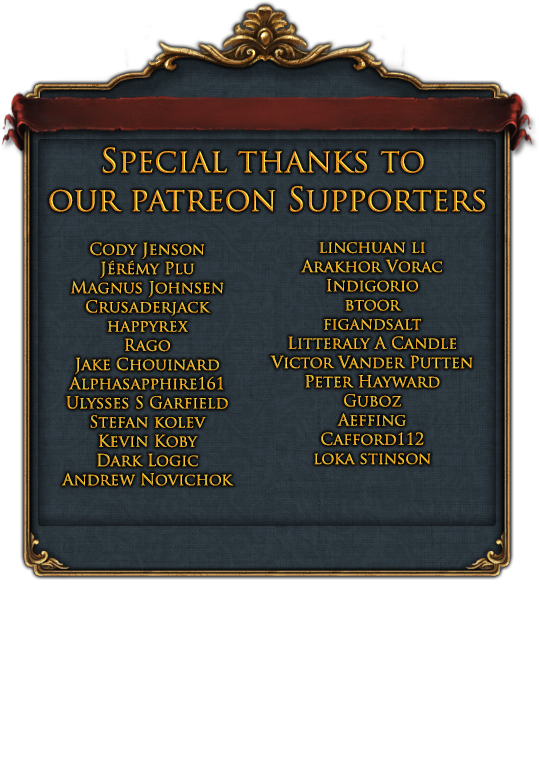
<style>
.page{position:relative;width:539px;height:777px;background:#ffffff}
.page>*{position:absolute;margin:0}
.t1{font:32.3px "TrajanPro-Regular"}
.t2{font:16px "TrajanPro-Regular"}
</style>
<div class="page">
<p class="t1" style="left:49px;top:147px;width:436px;height:65px;text-align:center">Special thanks to <br>our patreon Supporters</p>
<p class="t2" style="left:61px;top:242px;width:173px;height:244px;text-align:center">Cody Jenson<br>Jérémy Plu<br>Magnus Johnsen<br>Crusaderjack<br>happyrex<br>Rago<br>Jake Chouinard<br>Alphasapphire161<br>Ulysses S Garfield<br>Stefan kolev<br>Kevin Koby<br>Dark Logic<br>Andrew Novichok</p>
<p class="t2" style="left:270px;top:242px;width:203px;height:223px;text-align:center">linchuan li<br>Arakhor Vorac<br>Indigorio<br>btoor<br>figandsalt<br>Litteraly A Candle<br>Victor Vander Putten<br>Peter Hayward<br>Guboz<br>Aeffing<br>Cafford112<br>loka stinson</p>
</div>
